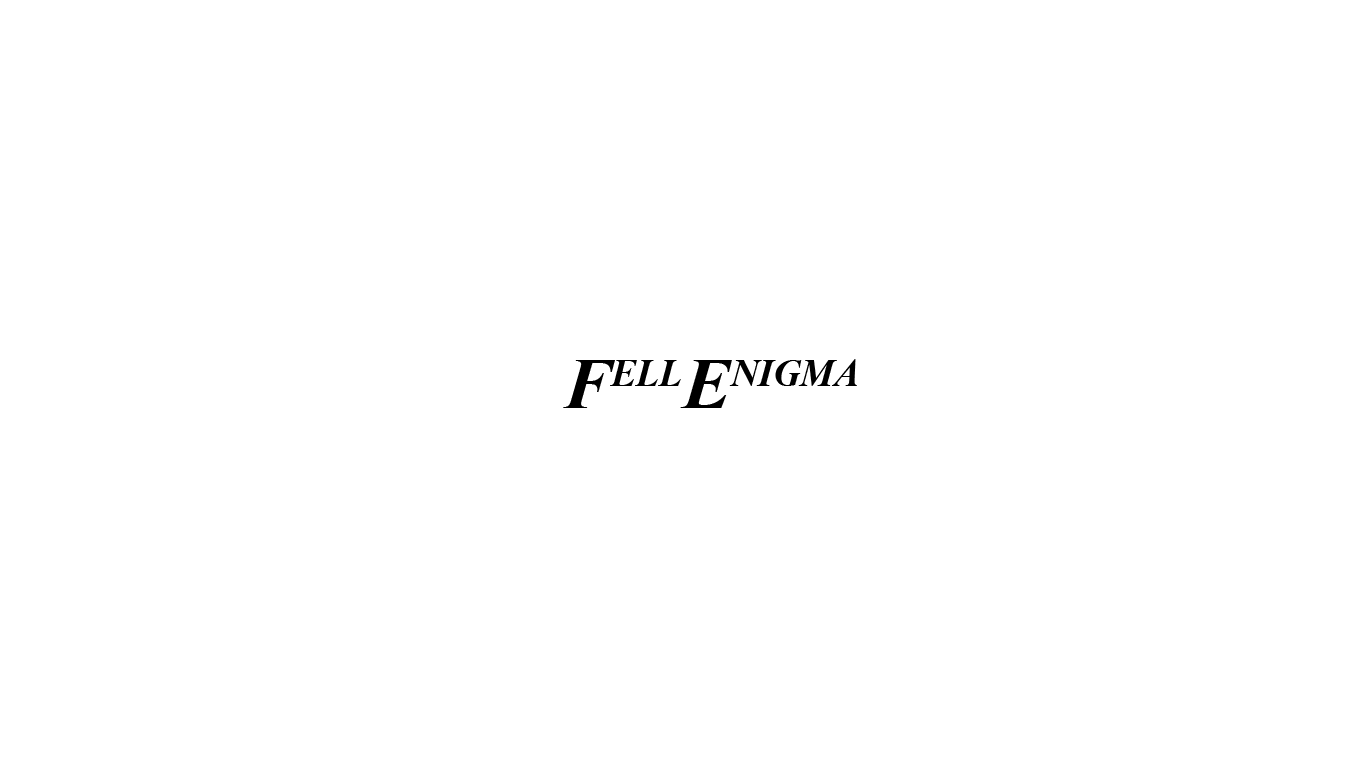
<style>
.page{position:relative;width:1366px;height:768px;background:#ffffff}
.page>*{position:absolute;margin:0}
.t1{font:65px "TimesNewRomanPS-BoldItalicMT";color:#000000}
.t2{font:72px "TimesNewRomanPS-BoldItalicMT";color:#000000}
</style>
<div class="page">
<p class="t1" style="left:563px;top:359px;width:294px;height:49px"><span class="t2">F</span>ELL<span class="t2">E</span>NIGMA</p>
</div>
